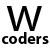
<style>
.page{position:relative;width:50px;height:50px;background:#ffffff}
.page>*{position:absolute;margin:0}
.t1{font:50px "MyriadPro-Regular";color:#000000}
.t2{font:16.1px "MyriadPro-Bold";color:#000000}
</style>
<div class="page">
<p class="t1" style="left:6px;top:6px;width:36px;height:25px">w</p>
<p class="t2" style="left:2px;top:32px;width:47px;height:12px">coders</p>
</div>
